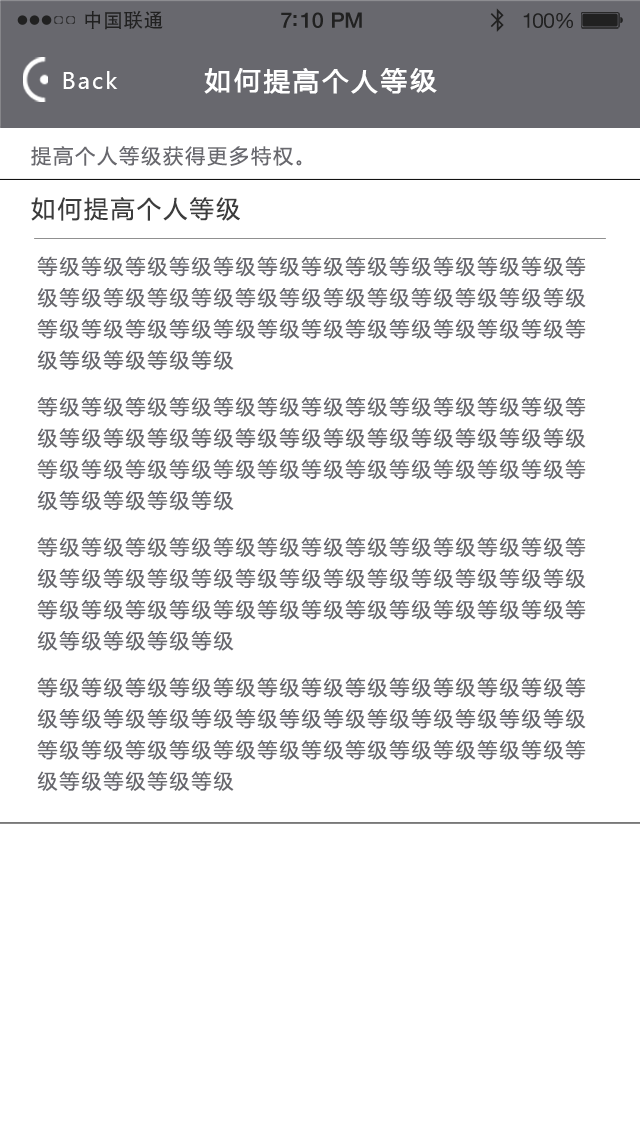
<style>
.page{position:relative;width:640px;height:1136px;background:#ffffff}
.page>*{position:absolute;margin:0}
.t1{font:19.7px "AdobeHeitiStd-Regular";letter-spacing:0.02em;color:#212121}
.t2{font:21.4px "HelveticaNeue-Medium";letter-spacing:-0.02em;color:#212121}
.t3{font:20.6px "HelveticaNeue";letter-spacing:-0.02em;color:#212121}
.t4{font:22px "MicrosoftYaHei";letter-spacing:0.1em;color:#ffffff}
.t5{font:26px "MicrosoftYaHei";letter-spacing:0.1em;color:#ffffff;font-weight:bold}
.t6{font:20px "MicrosoftYaHei";letter-spacing:0.1em;color:#68686e}
.t7{font:24px "MicrosoftYaHei";letter-spacing:0.1em;color:#3c3c3c}
.t8{font:20px/31.2px "MicrosoftYaHei";letter-spacing:0.1em;color:#68686e}
</style>
<div class="page">
<p class="t1" style="left:85px;top:10px;width:78px;height:20px">中国联通</p>
<p class="t2" style="left:281px;top:12px;width:81px;height:16px">7:10 PM</p>
<p class="t3" style="left:523px;top:13px;width:50px;height:16px">100%</p>
<p class="t4" style="left:63px;top:71px;width:55px;height:18px">Back</p>
<p class="t5" style="left:204px;top:68px;width:233px;height:26px">如何提高个人等级</p>
<p class="t6" style="left:31px;top:146px;width:271px;height:20px">提高个人等级获得更多特权。</p>
<p class="t7" style="left:31px;top:197px;width:209px;height:24px">如何提高个人等级</p>
<p class="t8" style="left:37px;top:256px;width:549px;height:114px">等级等级等级等级等级等级等级等级等级等级等级等级等<br>级等级等级等级等级等级等级等级等级等级等级等级等级<br>等级等级等级等级等级等级等级等级等级等级等级等级等<br>级等级等级等级等级</p>
<p class="t8" style="left:37px;top:397px;width:549px;height:114px">等级等级等级等级等级等级等级等级等级等级等级等级等<br>级等级等级等级等级等级等级等级等级等级等级等级等级<br>等级等级等级等级等级等级等级等级等级等级等级等级等<br>级等级等级等级等级</p>
<p class="t8" style="left:37px;top:537px;width:549px;height:114px">等级等级等级等级等级等级等级等级等级等级等级等级等<br>级等级等级等级等级等级等级等级等级等级等级等级等级<br>等级等级等级等级等级等级等级等级等级等级等级等级等<br>级等级等级等级等级</p>
<p class="t8" style="left:37px;top:677px;width:549px;height:114px">等级等级等级等级等级等级等级等级等级等级等级等级等<br>级等级等级等级等级等级等级等级等级等级等级等级等级<br>等级等级等级等级等级等级等级等级等级等级等级等级等<br>级等级等级等级等级</p>
</div>
